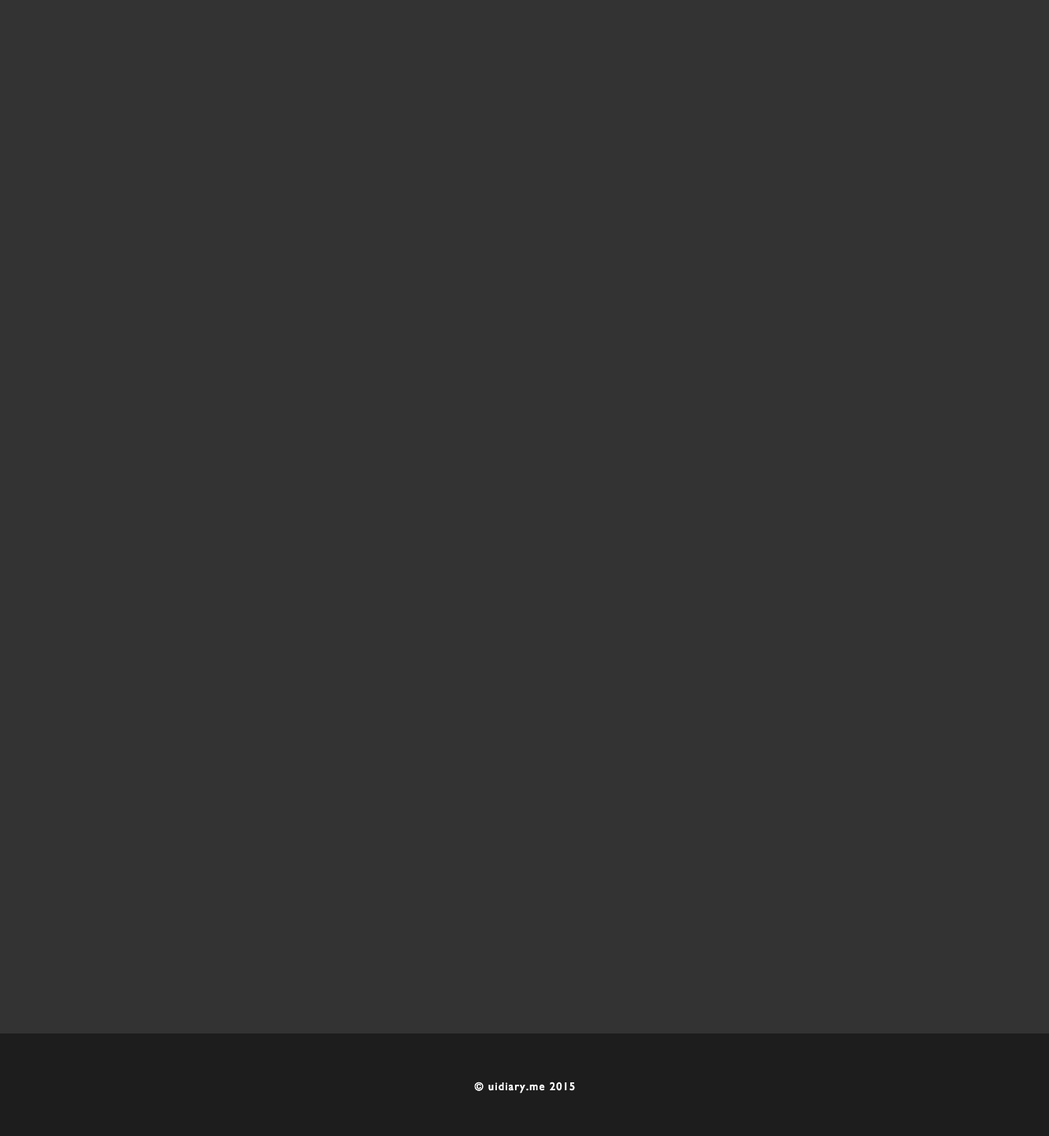
<style>
.page{position:relative;width:1049px;height:1136px;background:#333333}
.page>*{position:absolute;margin:0}
.t1{font:11px "GillSans";letter-spacing:0.1em;color:#ffffff}
</style>
<div class="page">
<p class="t1" style="left:474px;top:1082px;width:101px;height:12px">© uidiary.me 2015</p>
</div>
